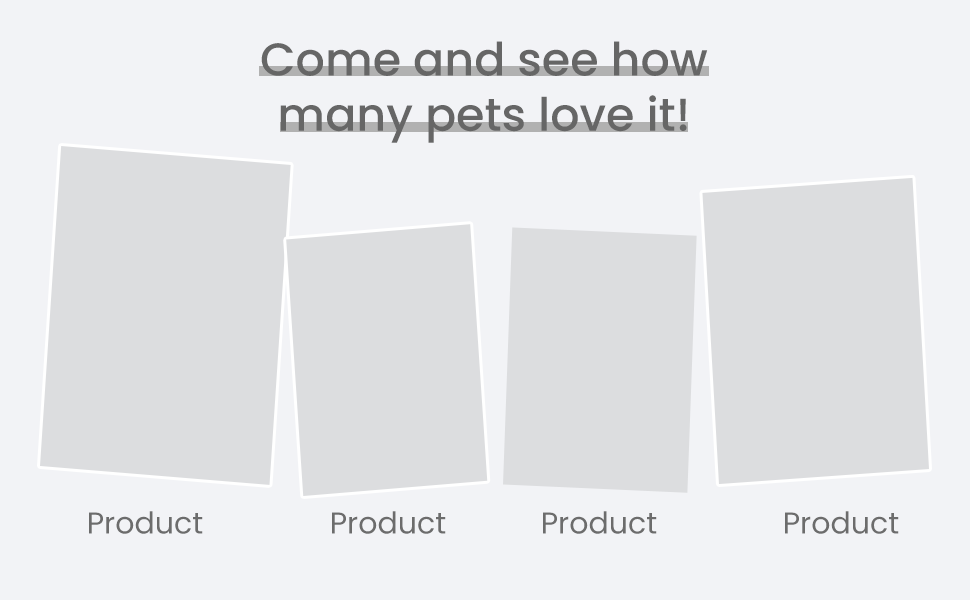
<style>
.page{position:relative;width:970px;height:600px;background:#f2f3f6}
.page>*{position:absolute;margin:0}
.t1{font:46px "Poppins-Medium";color:#666666}
.t2{font:30px "Poppins-Regular";color:#6c6c6c}
</style>
<div class="page">
<p class="t1" style="left:261px;top:41px;width:447px;height:102px;text-align:center">Come and see how<br>many pets love it!</p>
<p class="t2" style="left:89px;top:511px;width:114px;height:23px">Product</p>
<p class="t2" style="left:332px;top:511px;width:114px;height:23px">Product</p>
<p class="t2" style="left:543px;top:511px;width:114px;height:23px">Product</p>
<p class="t2" style="left:785px;top:511px;width:114px;height:23px">Product</p>
</div>
